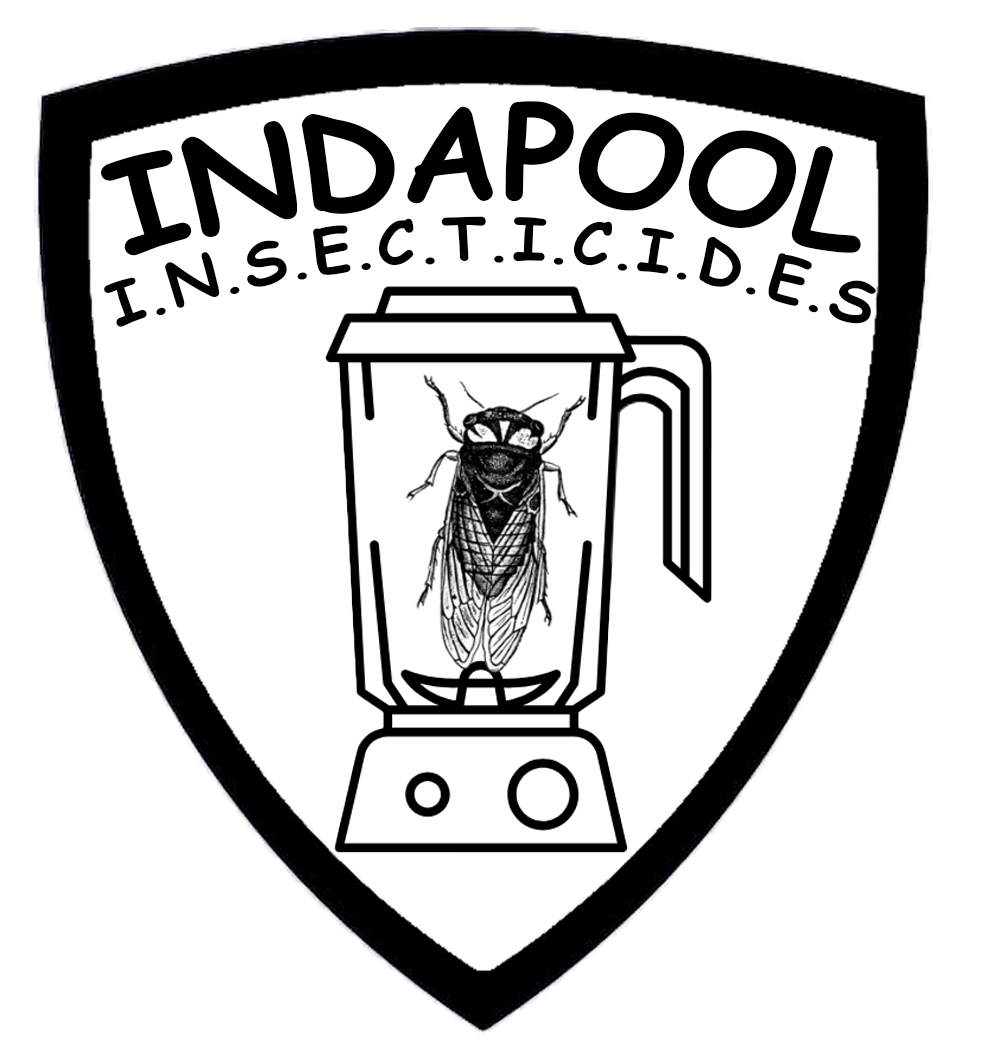
<style>
.page{position:relative;width:983px;height:1064px;background:#ffffff}
.page>*{position:absolute;margin:0}
.t1{font:128.6px "ComicSansMS-Bold";color:#000000}
.t2{font:58.7px "ComicSansMS-Bold";color:#000000}
</style>
<div class="page">
<p class="t1" style="left:101px;top:101px;width:760px;height:155px">INDAPOOL</p>
<p class="t2" style="left:104px;top:216px;width:772px;height:111px;text-align:center">I.N.S.E.C.T.I.C.I.D.E.S</p>
</div>
